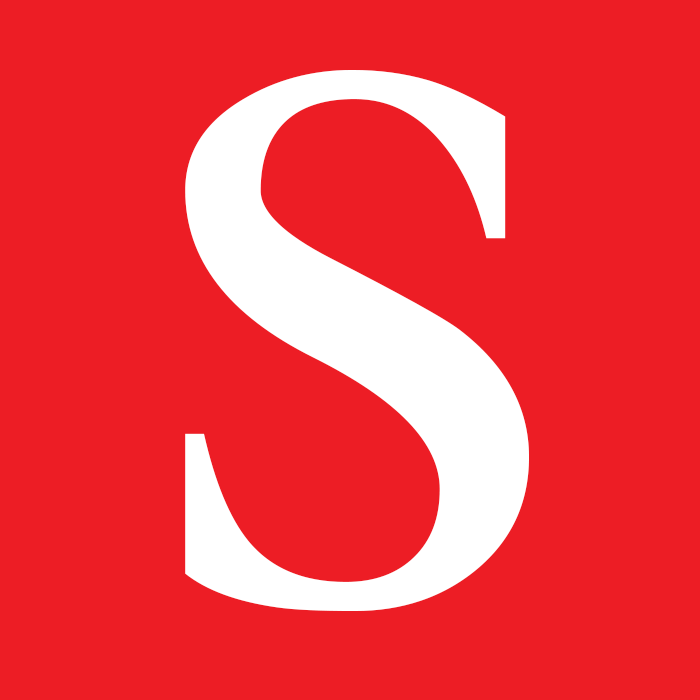
<style>
.page{position:relative;width:700px;height:700px;background:#ed1d25}
.page>*{position:absolute;margin:0}
.t1{font:1254.9px "3grammes5";letter-spacing:0.06em;color:#ffffff}
</style>
<div class="page">
<p class="t1" style="left:185px;top:70px;width:344px;height:541px">S</p>
</div>
